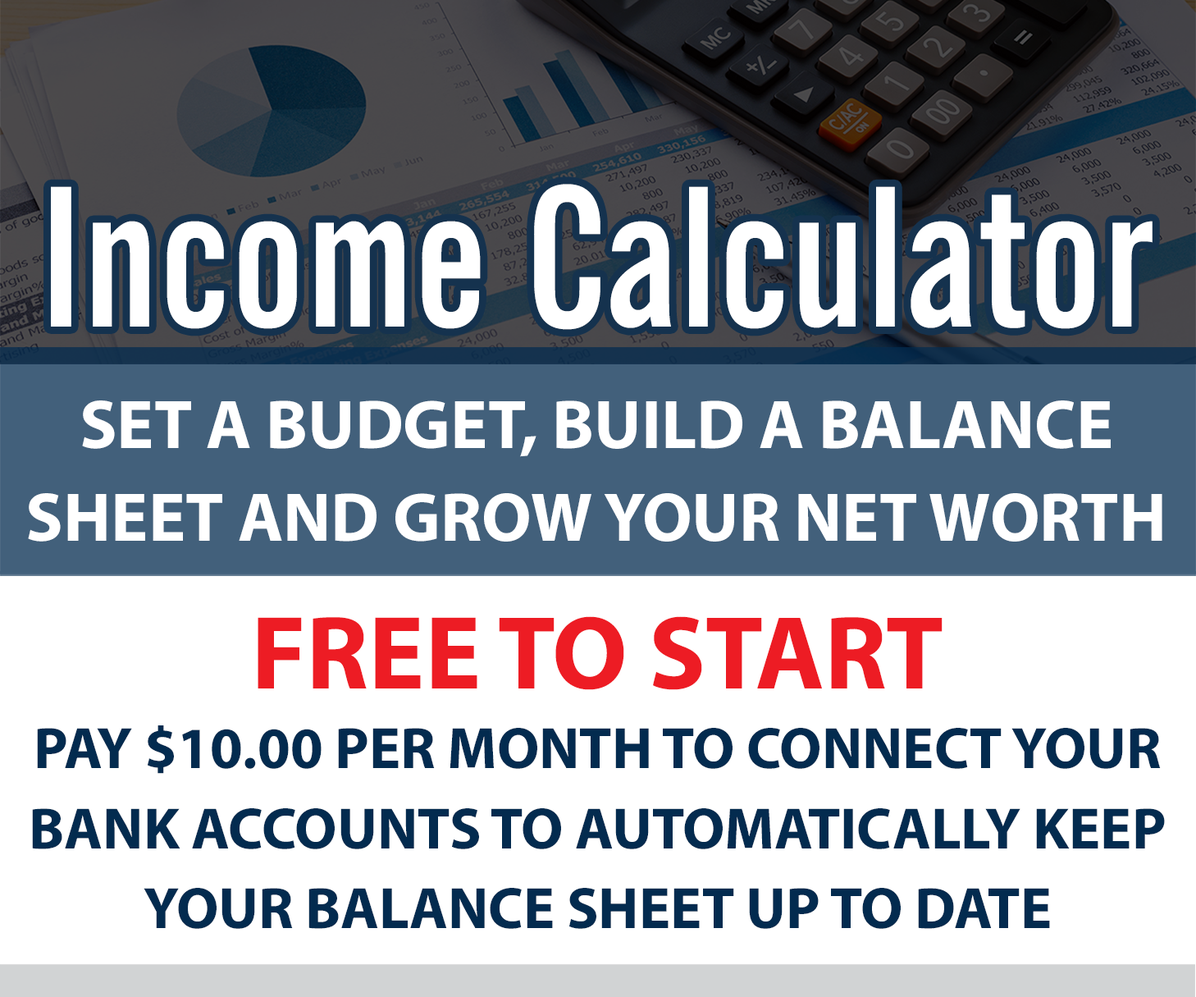
<style>
.page{position:relative;width:1196px;height:997px;background:#ffffff}
.page>*{position:absolute;margin:0}
.t1{font:193.2px "NewsGothicBT-BoldExtraCondensed";color:#ffffff}
.t2{font:69.4px/92.2px "MyriadPro-Bold";color:#ffffff;text-transform:uppercase}
.t3{font:58.6px/79.8px "MyriadPro-Bold";color:#032b4f;text-transform:uppercase}
.t4{font:104.6px/79.8px "MyriadPro-Bold";color:#ed1c24;text-transform:uppercase}
</style>
<div class="page">
<p class="t1" style="left:51px;top:184px;width:1102px;height:146px">Income Calculator</p>
<p class="t2" style="left:28px;top:400px;width:1135px;height:141px;text-align:center">Set a budget, build a balance<br>sheet and grow your net worth</p>
<p class="t3" style="left:32px;top:616px;width:1133px;height:313px;text-align:center"><span class="t4">Free to start<br></span>Pay $10.00 per month to connect your<br>bank accounts to automatically keep<br>your balance sheet up to date</p>
</div>
